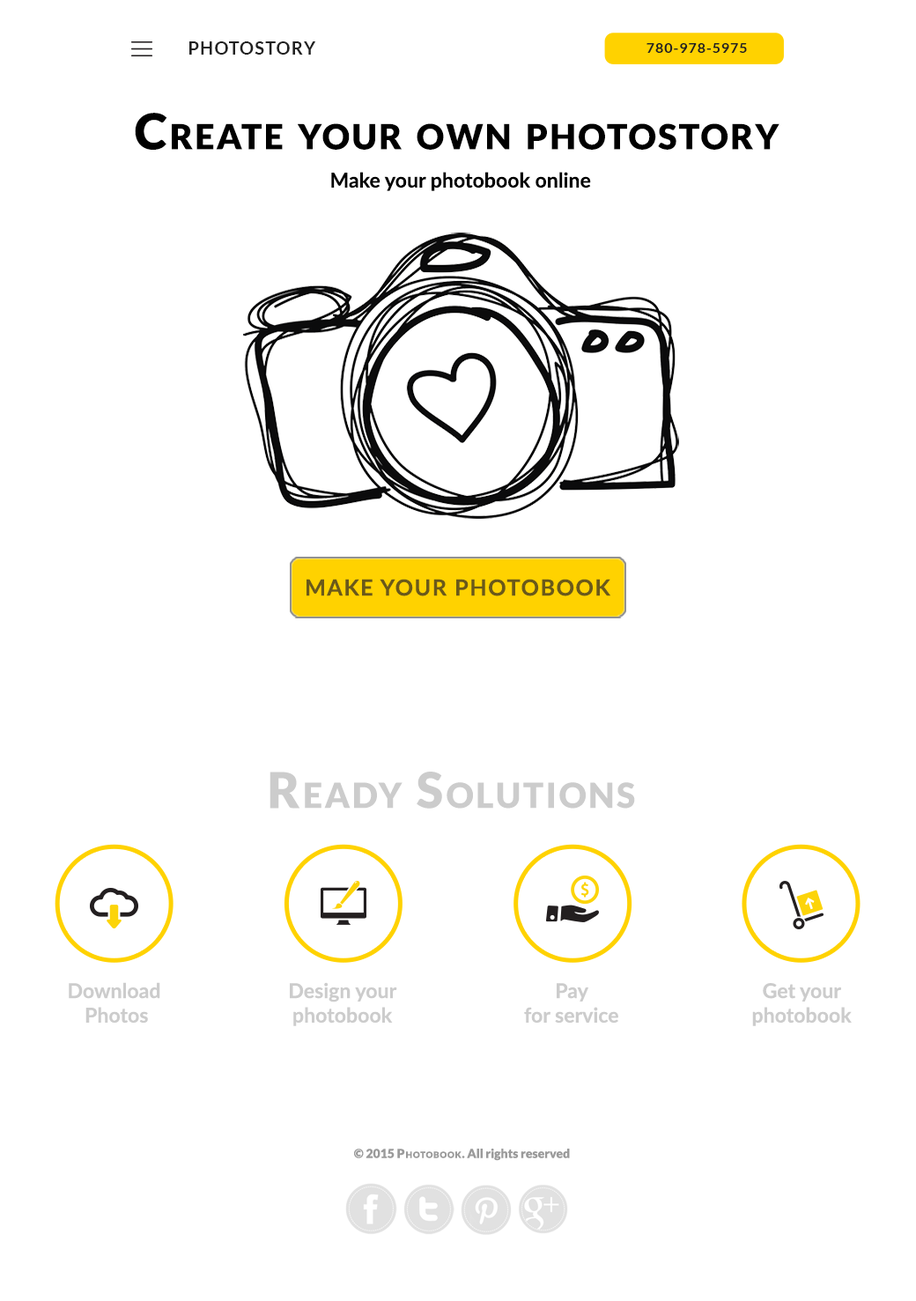
<style>
.page{position:relative;width:916px;height:1301px;background:#ffffff}
.page>*{position:absolute;margin:0}
.t1{font:17.6px "Lato-Bold";letter-spacing:0.06em;color:#212121;text-transform:uppercase}
.t2{font:14.1px "Lato-Bold";letter-spacing:0.06em;color:#212121;text-transform:uppercase}
.t3{font:49.3px "Lato-Black";letter-spacing:0.06em;color:#000000;font-variant:small-caps}
.t4{font:20.4px "Lato-Bold";color:#000000}
.t5{font:22.1px "Lato-Bold";letter-spacing:0.06em;color:#6a591a;text-transform:uppercase}
.t6{font:49.3px "Lato-Black";letter-spacing:0.06em;color:#cccccc;font-variant:small-caps}
.t7{font:20.4px "Lato-Bold";color:#cccccc}
.t8{font:12.3px "Lato-Black";color:#9a9a9a}
.t9{font:12.3px "Lato-Black";letter-spacing:0.08em;color:#9a9a9a;font-variant:small-caps}
</style>
<div class="page">
<p class="t1" style="left:189px;top:41px;width:126px;height:14px">PHOTOSTORY</p>
<p class="t2" style="left:647px;top:43px;width:100px;height:10px">780-978-5975</p>
<p class="t3" style="left:135px;top:113px;width:645px;height:37px">Create your own photostory</p>
<p class="t4" style="left:331px;top:172px;width:260px;height:19px">Make your photobook online</p>
<p class="t5" style="left:307px;top:579px;width:304px;height:17px">make your photobook</p>
<p class="t6" style="left:270px;top:772px;width:365px;height:37px">Ready Solutions</p>
<p class="t7" style="left:69px;top:982px;width:91px;height:42px;text-align:center">Download <br>Photos</p>
<p class="t7" style="left:290px;top:982px;width:107px;height:44px;text-align:center">Design your<br>photobook</p>
<p class="t7" style="left:524px;top:983px;width:95px;height:41px;text-align:center">Pay<br>for service</p>
<p class="t7" style="left:752px;top:983px;width:100px;height:43px;text-align:center">Get your<br>photobook</p>
<p class="t8" style="left:354px;top:1149px;width:216px;height:12px">© 2015 <span class="t9">Photobook</span>. All rights reserved</p>
</div>
